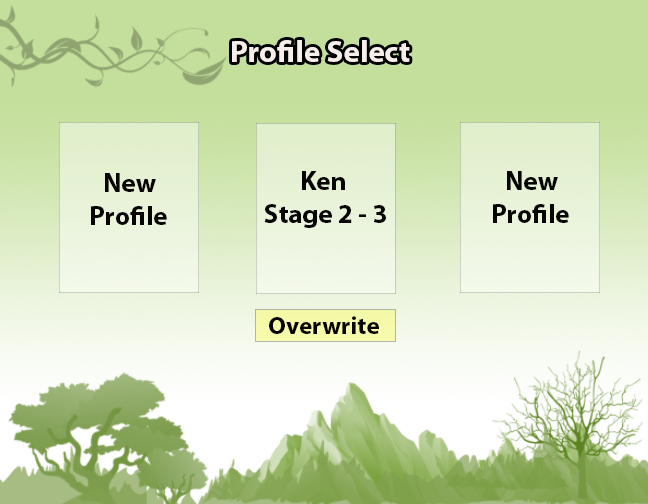
<style>
.page{position:relative;width:648px;height:504px}
.page>*{position:absolute;margin:0}
.t1{font:31px "MyriadPro-Bold";color:#f7eee9}
.t2{font:27px "MyriadPro-Bold";color:#060504}
.t3{font:31px "MyriadPro-Bold";color:#060504}
.t4{font:25px "MyriadPro-Bold";color:#060504}
</style>
<div class="page">
<p class="t1" style="left:232px;top:40px;width:178px;height:22px">Profile Select</p>
<p class="t2" style="left:91px;top:173px;width:76px;height:52px"><span class="t3"> </span>New<br>    Profile</p>
<p class="t2" style="left:264px;top:171px;width:122px;height:57px"><span class="t3"> </span>Ken<br>Stage 2 - 3</p>
<p class="t2" style="left:493px;top:171px;width:76px;height:52px"><span class="t3"> </span>New<br>    Profile</p>
<p class="t4" style="left:269px;top:316px;width:110px;height:18px">Overwrite</p>
</div>
